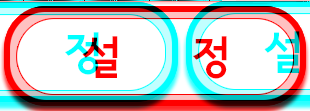
<style>
.page{position:relative;width:310px;height:111px;background:#ffffff}
.page>*{position:absolute;margin:0}
.t1{font:44.1px "SeoulNamsanEB"}
</style>
<div class="page">
<p class="t1" style="left:82px;top:31px;width:145px;height:43px">설     정</p>
</div>
